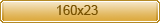
<style>
.page{position:relative;width:160px;height:23px}
.page>*{position:absolute;margin:0}
.t1{font:13px "ArialMT";color:#775100}
</style>
<div class="page">
<p class="t1" style="left:57px;top:5px;width:41px;height:10px">160x23</p>
</div>
